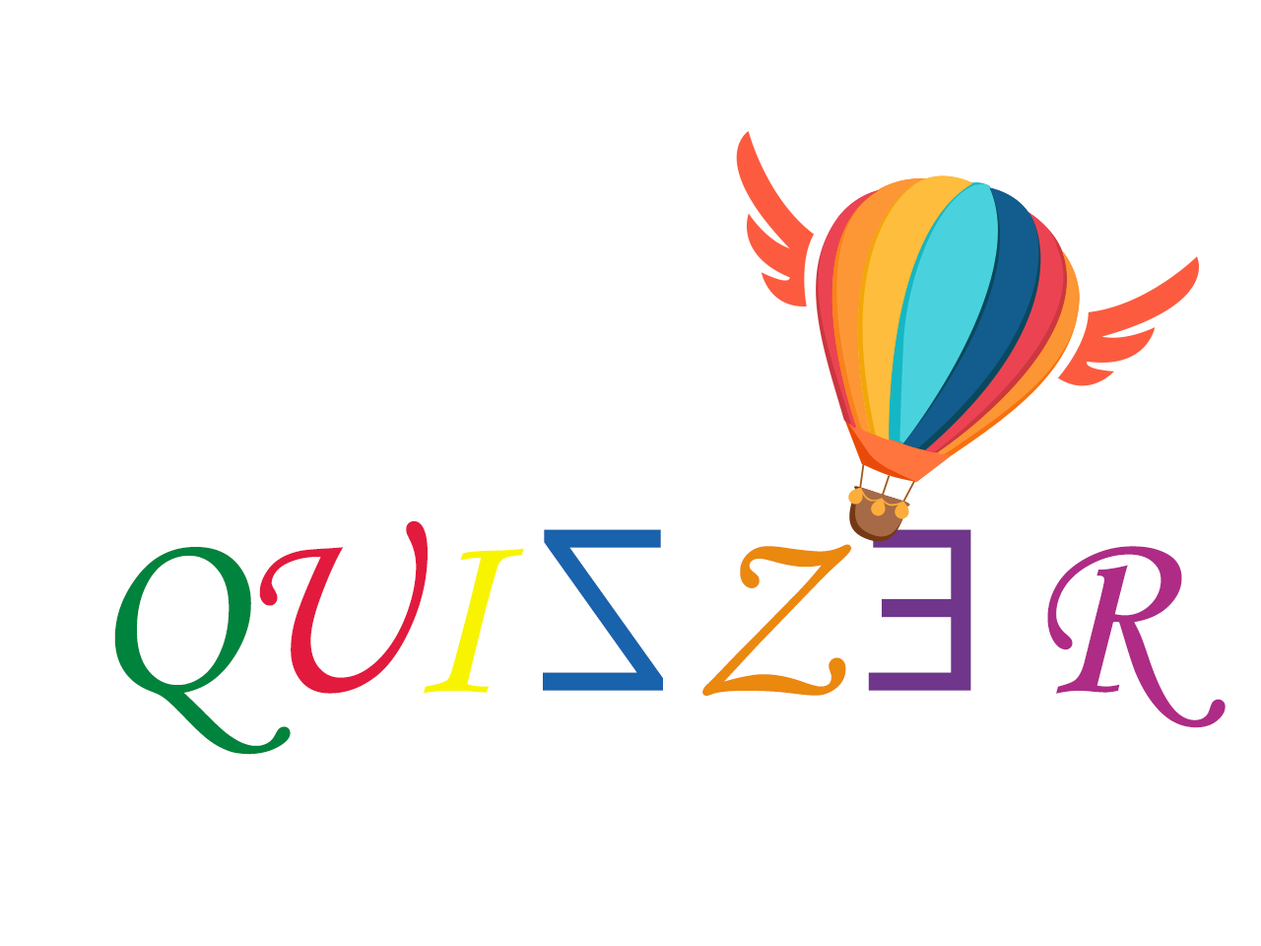
<style>
.page{position:relative;width:1261px;height:946px;background:#ffffff}
.page>*{position:absolute;margin:0}
.t1{font:245.7px "MonotypeCorsiva";letter-spacing:-0.025em;color:#00833c}
.t2{font:245.7px "MonotypeCorsiva";letter-spacing:-0.025em;color:#e21a3d}
.t3{font:245.7px "MonotypeCorsiva";letter-spacing:-0.025em;color:#f8f400}
.t4{font:245.7px "MonotypeCorsiva";letter-spacing:-0.025em;color:#eb880e}
.t5{font:245.7px "MonotypeCorsiva";letter-spacing:-0.025em;color:#ae2b86}
.t6{font:245.6px "Corbel";letter-spacing:-0.05em;color:#1962ac}
.t7{font:245.6px "Corbel";letter-spacing:-0.05em;color:#6f368b}
</style>
<div class="page">
<p class="t1" style="left:114px;top:520px;width:1111px;height:235px">Q<span class="t2">U</span><span class="t3">I    </span><span class="t4">Z    </span><span class="t5">R</span></p>
<p class="t6" style="left:543px;top:529px;width:120px;height:162px;rotate:180deg">Z</p>
<p class="t7" style="left:868px;top:529px;width:103px;height:162px;rotate:180deg">E</p>
</div>
